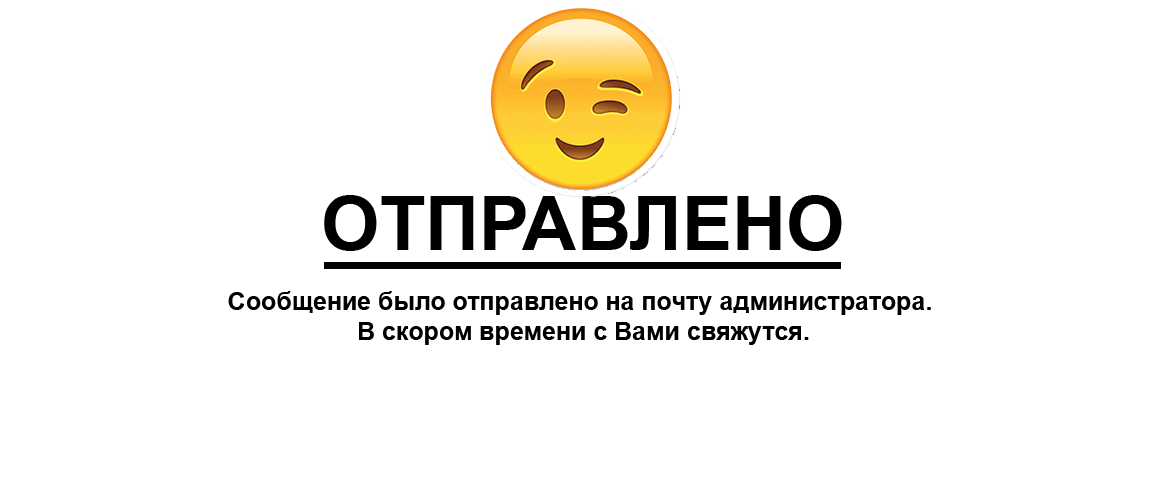
<style>
.page{position:relative;width:1163px;height:500px;background:#ffffff}
.page>*{position:absolute;margin:0}
.t1{font:75px "Arial-BoldMT";color:#000000}
.t2{font:25px "Arial-BoldMT";color:#000000}
</style>
<div class="page">
<p class="t1" style="left:324px;top:195px;width:518px;height:56px">ОТПРАВЛЕНО</p>
<p class="t2" style="left:228px;top:291px;width:703px;height:54px;text-align:center">Сообщение было отправлено на почту администратора.<br> В скором времени с Вами свяжутся.</p>
</div>
